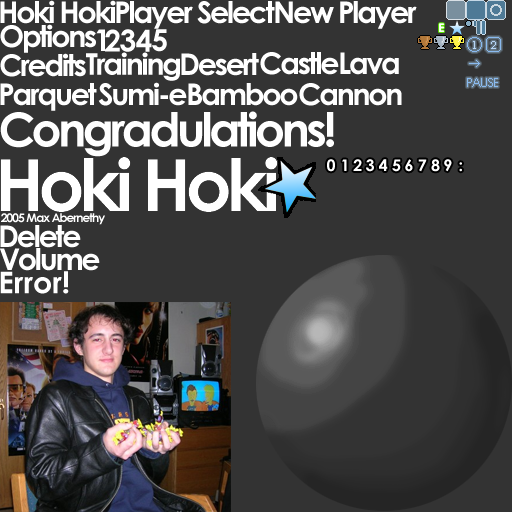
<style>
.page{position:relative;width:512px;height:512px;background:#333333}
.page>*{position:absolute;margin:0}
.t1{font:30px "CenturyGothic-Bold";letter-spacing:-0.075em;color:#ffffff}
.t2{font:47px "CenturyGothic-Bold";letter-spacing:-0.075em;color:#ffffff}
.t3{font:12px "CenturyGothic-Bold";letter-spacing:-0.075em;color:#ffffff}
.t4{font:30px "CenturyGothic-Bold";color:#ffffff}
</style>
<div class="page">
<p class="t1" style="left:0px;top:0px;width:116px;height:24px">Hoki Hoki</p>
<p class="t1" style="left:116px;top:1px;width:159px;height:28px">Player Select</p>
<p class="t1" style="left:275px;top:1px;width:142px;height:28px">New Player</p>
<p class="t1" style="left:0px;top:24px;width:96px;height:29px">Options</p>
<p class="t1" style="left:0px;top:53px;width:86px;height:24px">Credits</p>
<p class="t1" style="left:86px;top:52px;width:94px;height:29px">Training</p>
<p class="t1" style="left:181px;top:53px;width:78px;height:23px">Desert</p>
<p class="t1" style="left:260px;top:52px;width:79px;height:23px">Castle</p>
<p class="t1" style="left:340px;top:52px;width:59px;height:23px">Lava</p>
<p class="t1" style="left:0px;top:83px;width:97px;height:28px">Parquet</p>
<p class="t1" style="left:98px;top:82px;width:89px;height:24px">Sumi-e</p>
<p class="t1" style="left:188px;top:83px;width:110px;height:23px">Bamboo</p>
<p class="t1" style="left:299px;top:83px;width:103px;height:23px">Cannon</p>
<p class="t2" style="left:0px;top:111px;width:334px;height:46px">Congradulations!</p>
<p class="t3" style="left:1px;top:213px;width:104px;height:12px">2005 Max Abernethy</p>
<p class="t1" style="left:0px;top:225px;width:81px;height:23px">Delete</p>
<p class="t1" style="left:0px;top:248px;width:100px;height:23px">Volume</p>
<p class="t4" style="left:0px;top:271px;width:69px;height:23px">Error!</p>
</div>
